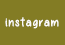
<style>
.page{position:relative;width:65px;height:45px;background:#837c24}
.page>*{position:absolute;margin:0}
.t1{font:12px "All-Things-Pink";letter-spacing:0.1em;color:#fcfcfb;font-weight:bold}
</style>
<div class="page">
<p class="t1" style="left:5px;top:17px;width:54px;height:12px">instagram</p>
</div>
